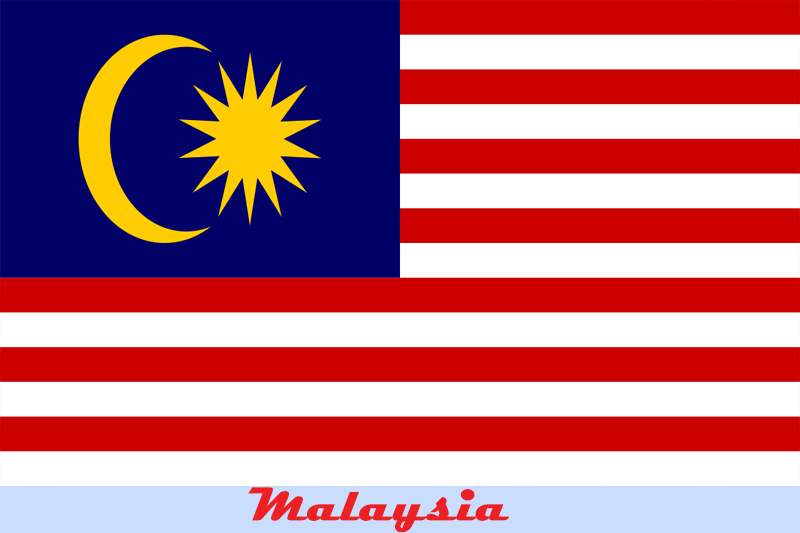
<style>
.page{position:relative;width:800px;height:533px;background:#ffffff}
.page>*{position:absolute;margin:0}
.t1{font:48px "Magneto-Bold";color:#ed2124;scale:1.08 1}
</style>
<div class="page">
<p class="t1" style="left:248px;top:487px;width:262px;height:46px">Malaysia</p>
</div>
